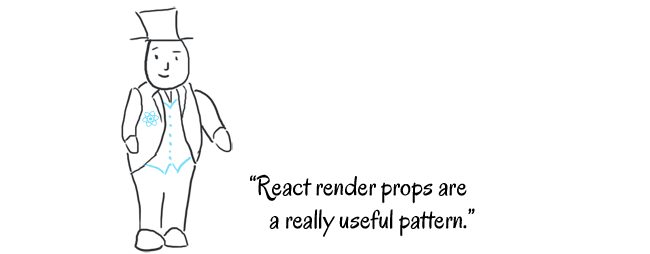
<style>
.page{position:relative;width:650px;height:254px;background:#ffffff}
.page>*{position:absolute;margin:0}
.t1{font:27.7px "Oregano-Regular";color:#000000}
</style>
<div class="page">
<p class="t1" style="left:250px;top:174px;width:225px;height:63px">“React render props are<br>    a really useful pattern.”</p>
</div>
